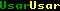
<style>
.page{position:relative;width:60px;height:11px;background:#000000}
.page>*{position:absolute;margin:0}
.t1{font:13.2px "Onesize";color:#009900;scale:0.91 1}
.t2{font:13.2px "Onesize";color:#ffff66;scale:0.91 1}
</style>
<div class="page">
<p class="t1" style="left:0px;top:1px;width:30px;height:8px">Usar</p>
<p class="t2" style="left:30px;top:1px;width:30px;height:8px">Usar</p>
</div>
